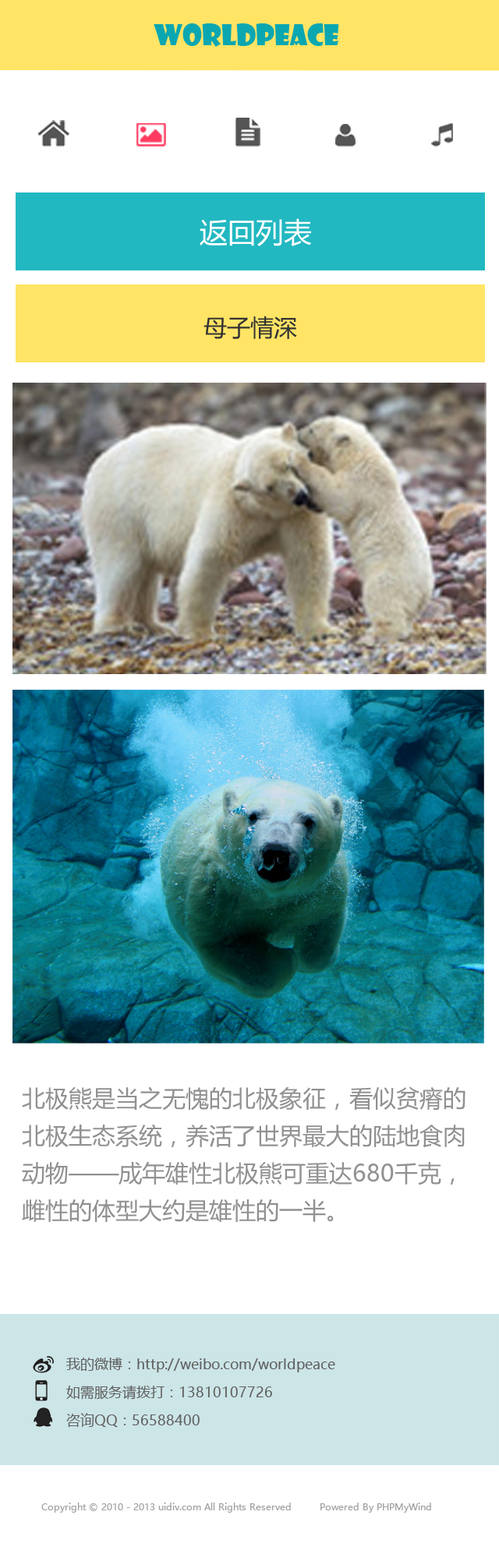
<style>
.page{position:relative;width:499px;height:1568px;background:#ffffff}
.page>*{position:absolute;margin:0}
.t1{font:28.1px "ShowcardGothic-Reg";color:#0ba7b1}
.t2{font:28.1px "MicrosoftYaHei";color:#ffffff}
.t3{font:23.4px "MicrosoftYaHei";color:#333333}
.t4{font:23.4px/37.4px "MicrosoftYaHei";color:#919191}
.t5{font:14px/28.1px "MicrosoftYaHei";color:#616161}
.t6{font:9.4px "MicrosoftYaHei";color:#a2a2a2}
</style>
<div class="page">
<p class="t1" style="left:154px;top:23px;width:185px;height:24px">worldpeace</p>
<p class="t2" style="left:200px;top:218px;width:112px;height:28px">返回列表</p>
<p class="t3" style="left:203px;top:316px;width:94px;height:23px">母子情深</p>
<p class="t4" style="left:22px;top:1086px;width:443px;height:136px">北极熊是当之无愧的北极象征，看似贫瘠的北极生态系统，养活了世界最大的陆地食肉动物——成年雄性北极熊可重达680千克，雌性的体型大约是雄性的一半。</p>
<p class="t5" style="left:66px;top:1358px;width:269px;height:69px">我的微博：http://weibo.com/worldpeace            <br>如需服务请拨打：13810107726        <br>咨询QQ：56588400</p>
<p class="t6" style="left:41px;top:1503px;width:390px;height:10px">Copyright © 2010 - 2013 uidiv.com All Rights Reserved         Powered By PHPMyWind</p>
</div>
